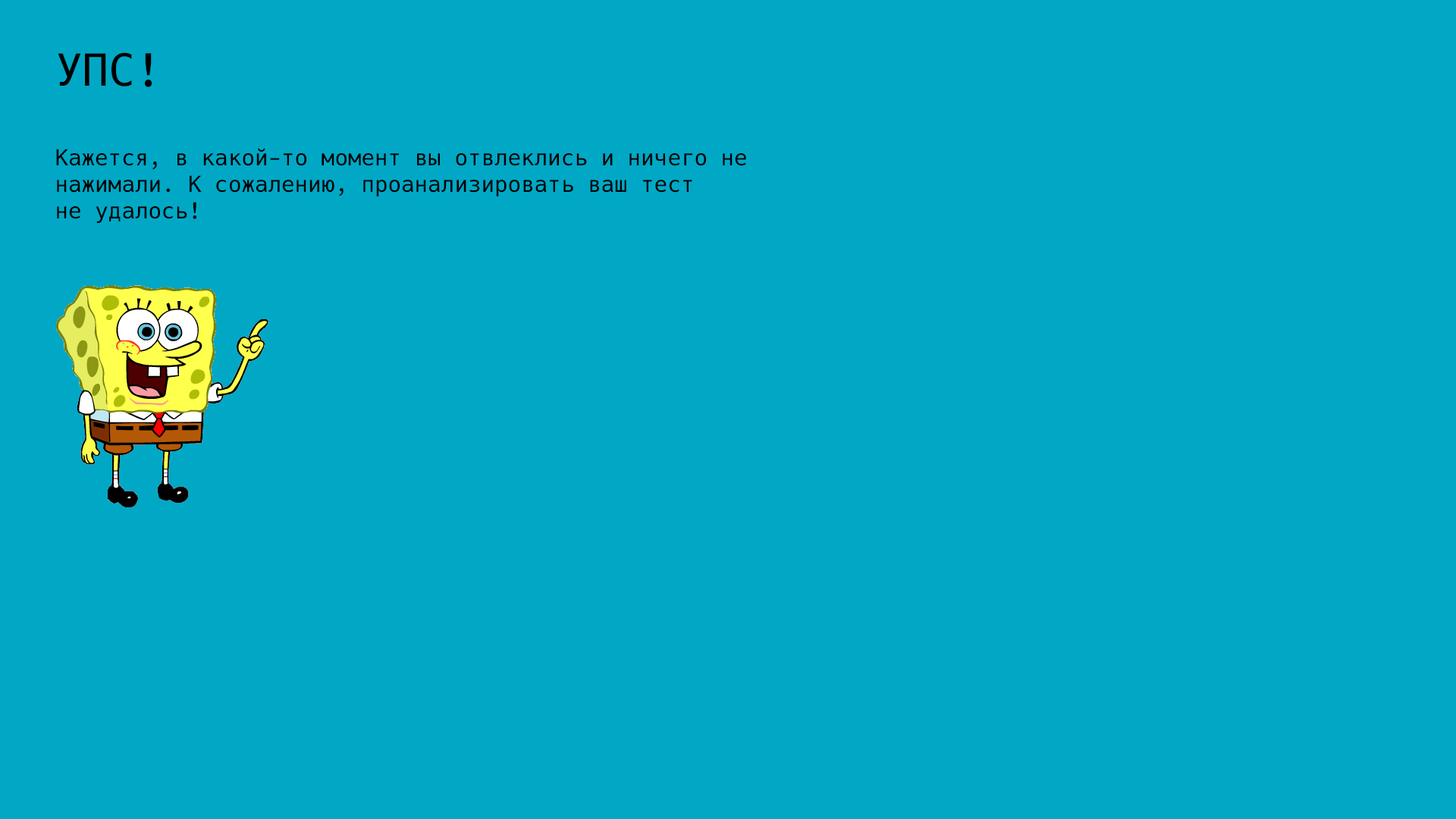
<style>
.page{position:relative;width:1456px;height:819px;background:#00a8c6}
.page>*{position:absolute;margin:0}
.t1{font:22.1px "HackNerdFontComplete-Regular";color:#000000}
.t2{font:44.2px "HackNerdFontComplete-Regular";color:#000000}
</style>
<div class="page">
<p class="t1" style="left:56px;top:52px;width:690px;height:171px"><span class="t2">УПС!<br><br></span>Кажется, в какой-то момент вы отвлеклись и ничего не<br>нажимали. К сожалению, проанализировать ваш тест<br>не удалось!</p>
</div>
